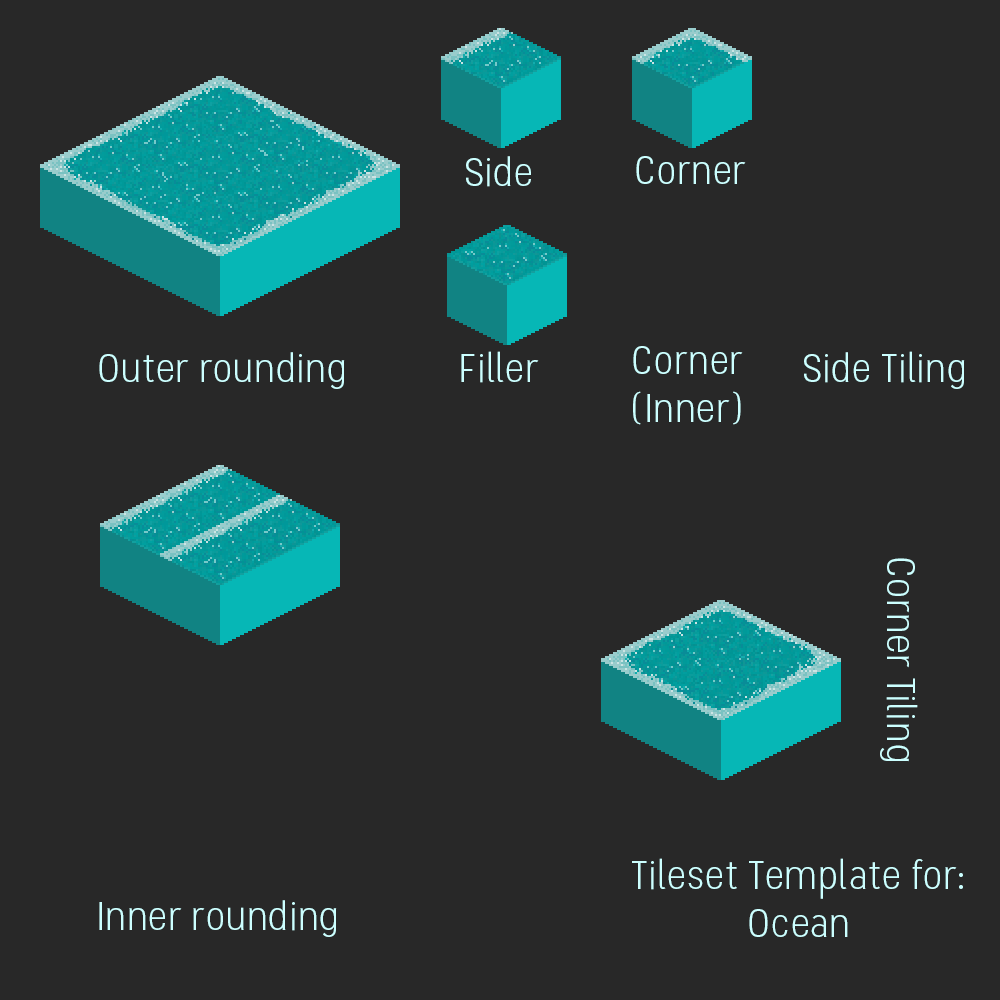
<style>
.page{position:relative;width:1000px;height:1000px;background:#282828}
.page>*{position:absolute;margin:0}
.t1{font:40px "Stellar-Light";color:#ccffff}
</style>
<div class="page">
<p class="t1" style="left:466px;top:156px;width:65px;height:31px">Side</p>
<p class="t1" style="left:636px;top:156px;width:110px;height:28px">Corner</p>
<p class="t1" style="left:99px;top:352px;width:246px;height:37px">Outer rounding</p>
<p class="t1" style="left:461px;top:351px;width:78px;height:32px">Filler</p>
<p class="t1" style="left:633px;top:346px;width:110px;height:79px;text-align:center">Corner (Inner)</p>
<p class="t1" style="left:804px;top:351px;width:161px;height:38px">Side Tiling</p>
<p class="t1" style="left:880px;top:558px;width:38px;height:204px;rotate:90deg">Corner Tiling</p>
<p class="t1" style="left:632px;top:858px;width:331px;height:79px;text-align:center">Tileset Template for:<br>Ocean</p>
<p class="t1" style="left:99px;top:900px;width:238px;height:37px">Inner rounding</p>
</div>
